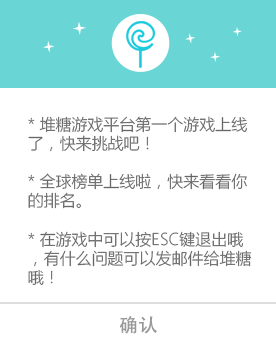
<style>
.page{position:relative;width:276px;height:351px;background:#ffffff}
.page>*{position:absolute;margin:0}
.t1{font:16px "MicrosoftYaHeiLight";color:#666666}
.t2{font:18.8px "AdobeHeitiStd-Regular";color:#999999}
</style>
<div class="page">
<p class="t1" style="left:28px;top:116px;width:224px;height:169px">* 堆糖游戏平台第一个游戏上线了，快来挑战吧！<br><br>* 全球榜单上线啦，快来看看你的排名。<br><br>* 在游戏中可以按ESC键退出哦，有什么问题可以发邮件给堆糖哦！</p>
<p class="t2" style="left:119px;top:316px;width:38px;height:18px">确认</p>
</div>
